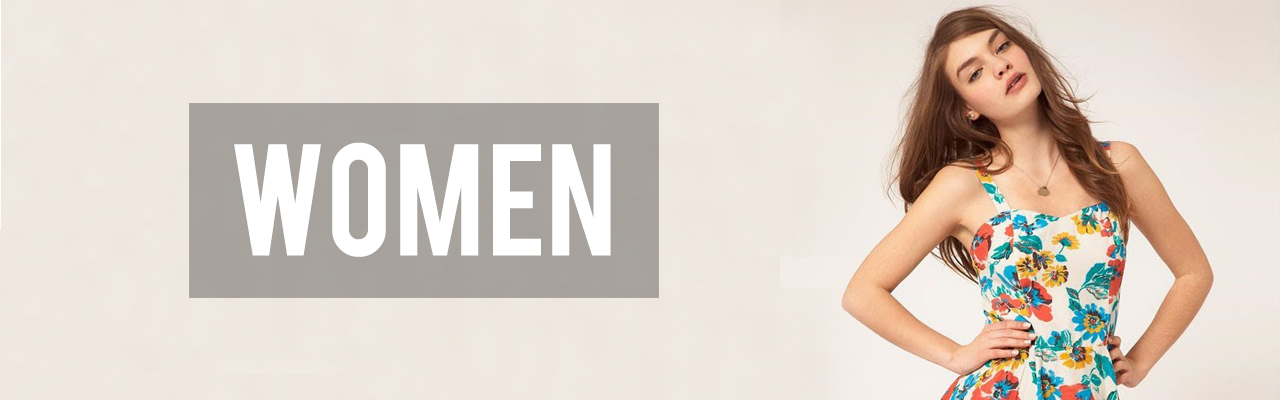
<style>
.page{position:relative;width:1280px;height:400px}
.page>*{position:absolute;margin:0}
.t1{font:125px "Bebas";color:#ffffff}
</style>
<div class="page">
<p class="t1" style="left:234px;top:142px;width:377px;height:115px">women</p>
</div>
